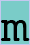
<style>
.page{position:relative;width:30px;height:45px;background:#7accc8}
.page>*{position:absolute;margin:0}
.t1{font:46px "Courier";color:#000000}
</style>
<div class="page">
<p class="t1" style="left:1px;top:20px;width:29px;height:21px">m</p>
</div>
